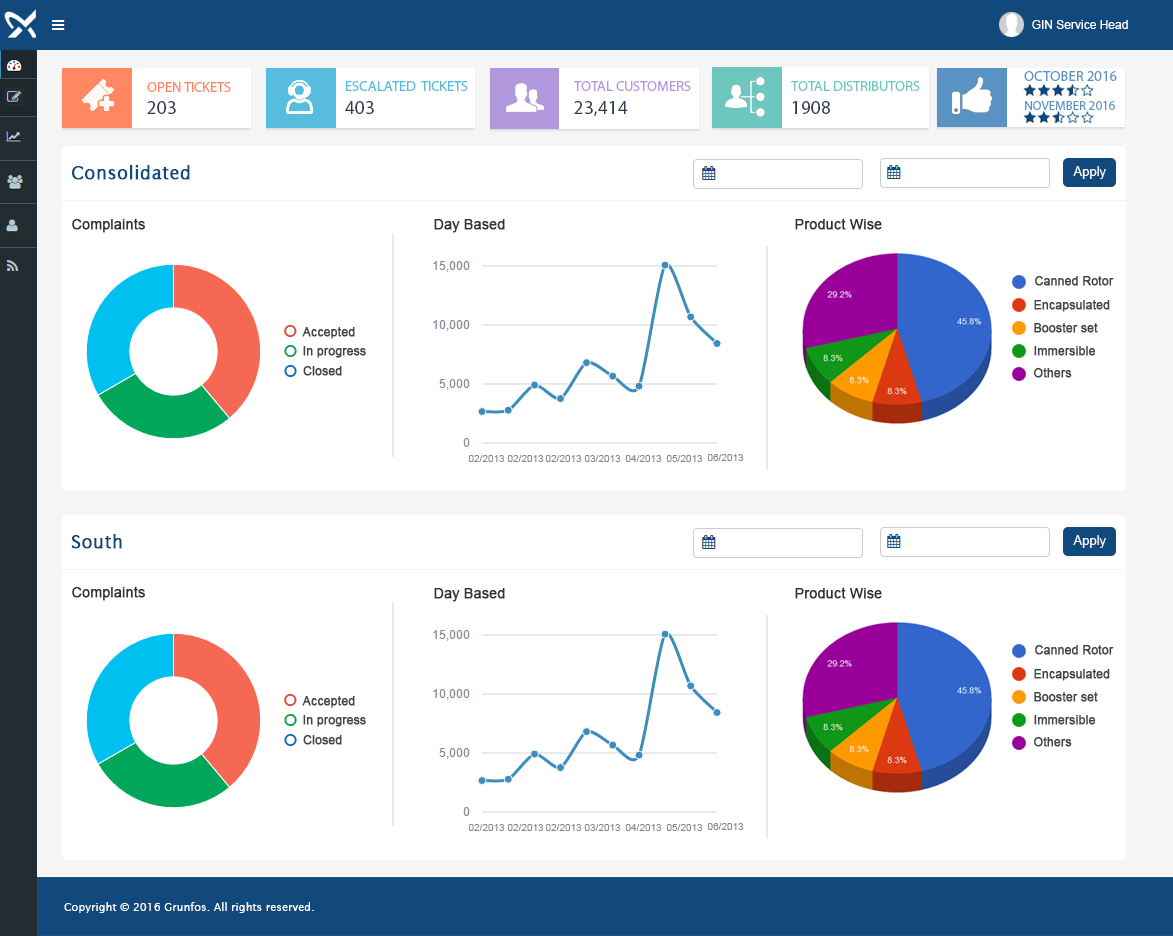
<style>
.page{position:relative;width:1173px;height:936px;background:#ffffff}
.page>*{position:absolute;margin:0}
.t1{font:12px "ArialMT";color:#fffefd}
.t2{font:14.8px "MyriadPro-Regular";color:#5893c4}
.t3{font:14.6px "MyriadPro-Regular";color:#ff8761;text-transform:uppercase}
.t4{font:36px "MyriadPro-Regular";color:#2f3b4c}
.t5{font:14.6px "MyriadPro-Regular";color:#57bdde;text-transform:uppercase}
.t6{font:18.8px "MyriadPro-Regular";color:#2f3b4c}
.t7{font:14.6px "MyriadPro-Regular";color:#b198dc;text-transform:uppercase}
.t8{font:14.6px "MyriadPro-Regular";color:#6dc7be;text-transform:uppercase}
.t9{font:13px "MyriadPro-Regular";color:#5893c4}
.t10{font:18px "LucidaSans";color:#11497c;font-weight:bold}
.t11{font:13px "ArialMT";color:#f6f8fa}
.t12{font:14px "ArialMT";color:#333333;font-weight:bold}
.t13{font:12px "ArialMT";color:#444444;font-weight:bold}
.t14{font:12px/9.5px "ArialMT";color:#444444;font-weight:bold}
.t15{font:10px "ArialMT";color:#888888}
.t16{font:11px "LucidaSans";color:#fdffff}
</style>
<div class="page">
<p class="t1" style="left:1032px;top:20px;width:96px;height:9px">GIN Service Head</p>
<p class="t2" style="left:1024px;top:71px;width:93px;height:10px">OCTOBER 2016</p>
<p class="t3" style="left:147px;top:82px;width:84px;height:10px">Open Tickets<br><span class="t4">215</span></p>
<p class="t5" style="left:345px;top:81px;width:123px;height:33px">Escalated  tIckets<br><span class="t6">403</span></p>
<p class="t7" style="left:574px;top:81px;width:117px;height:35px">Total Customers<br><span class="t6">23,414</span></p>
<p class="t8" style="left:791px;top:81px;width:129px;height:33px">Total Distributors<br><span class="t6">1908</span></p>
<p class="t6" style="left:147px;top:101px;width:29px;height:13px">203</p>
<p class="t9" style="left:1025px;top:101px;width:90px;height:9px">NOVEMBER 2016</p>
<p class="t10" style="left:72px;top:165px;width:118px;height:15px">Consolidated</p>
<p class="t11" style="left:1073px;top:166px;width:33px;height:13px">Apply</p>
<p class="t12" style="left:72px;top:218px;width:73px;height:15px">Complaints</p>
<p class="t12" style="left:434px;top:219px;width:71px;height:14px">Day Based</p>
<p class="t12" style="left:795px;top:218px;width:87px;height:12px">Product Wise</p>
<p class="t13" style="left:1035px;top:276px;width:79px;height:10px">Canned Rotor</p>
<p class="t13" style="left:1034px;top:300px;width:76px;height:12px">Encapsulated</p>
<p class="t14" style="left:302px;top:327px;width:64px;height:31px"><span class="t13"><br><br></span>Accepted<br><br>In progress</p>
<p class="t13" style="left:1034px;top:323px;width:64px;height:10px">Booster set</p>
<p class="t13" style="left:1034px;top:346px;width:62px;height:10px">Immersible</p>
<p class="t13" style="left:303px;top:366px;width:39px;height:10px">Closed</p>
<p class="t13" style="left:1034px;top:368px;width:38px;height:10px">Others</p>
<p class="t15" style="left:468px;top:455px;width:37px;height:7px">02/2013</p>
<p class="t15" style="left:507px;top:455px;width:37px;height:7px">02/2013</p>
<p class="t15" style="left:545px;top:455px;width:37px;height:7px">02/2013</p>
<p class="t15" style="left:584px;top:455px;width:37px;height:7px">03/2013</p>
<p class="t15" style="left:625px;top:455px;width:37px;height:7px">04/2013</p>
<p class="t15" style="left:666px;top:455px;width:37px;height:7px">05/2013</p>
<p class="t15" style="left:707px;top:454px;width:37px;height:7px">06/2013</p>
<p class="t10" style="left:71px;top:534px;width:51px;height:15px">South</p>
<p class="t11" style="left:1073px;top:535px;width:33px;height:13px">Apply</p>
<p class="t12" style="left:72px;top:586px;width:73px;height:15px">Complaints</p>
<p class="t12" style="left:434px;top:588px;width:71px;height:14px">Day Based</p>
<p class="t12" style="left:795px;top:587px;width:87px;height:12px">Product Wise</p>
<p class="t13" style="left:1035px;top:645px;width:79px;height:10px">Canned Rotor</p>
<p class="t13" style="left:1034px;top:669px;width:76px;height:12px">Encapsulated</p>
<p class="t14" style="left:302px;top:696px;width:64px;height:31px"><span class="t13"><br><br></span>Accepted<br><br>In progress</p>
<p class="t13" style="left:1034px;top:692px;width:64px;height:10px">Booster set</p>
<p class="t13" style="left:1034px;top:715px;width:62px;height:10px">Immersible</p>
<p class="t13" style="left:303px;top:735px;width:39px;height:10px">Closed</p>
<p class="t13" style="left:1034px;top:737px;width:38px;height:10px">Others</p>
<p class="t15" style="left:468px;top:824px;width:37px;height:7px">02/2013</p>
<p class="t15" style="left:507px;top:824px;width:37px;height:7px">02/2013</p>
<p class="t15" style="left:545px;top:824px;width:37px;height:7px">02/2013</p>
<p class="t15" style="left:584px;top:824px;width:37px;height:7px">03/2013</p>
<p class="t15" style="left:625px;top:824px;width:37px;height:7px">04/2013</p>
<p class="t15" style="left:666px;top:824px;width:37px;height:7px">05/2013</p>
<p class="t15" style="left:707px;top:823px;width:37px;height:7px">06/2013</p>
<p class="t16" style="left:64px;top:902px;width:250px;height:11px">Copyright © 2016 Grunfos. All rights reserved.</p>
</div>
